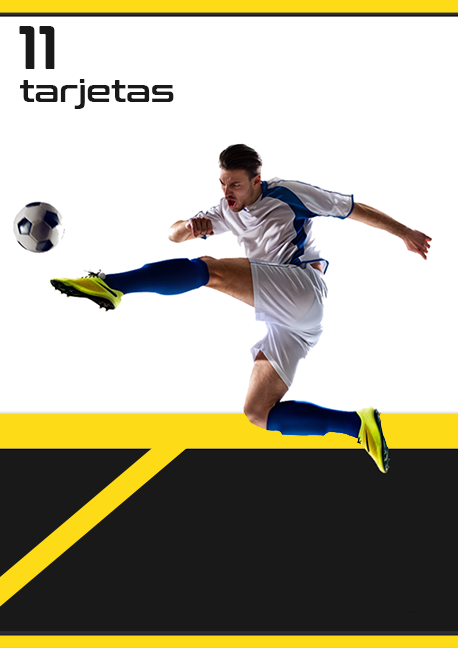
<style>
.page{position:relative;width:458px;height:648px;background:#ffffff}
.page>*{position:absolute;margin:0}
.t1{font:60.6px "ConthraxSb-Regular";color:#191919}
.t2{font:31.2px "ConthraxSb-Regular";color:#191919}
</style>
<div class="page">
<p class="t1" style="left:19px;top:26px;width:36px;height:43px">11</p>
<p class="t2" style="left:20px;top:79px;width:154px;height:30px">tarjetas</p>
</div>
